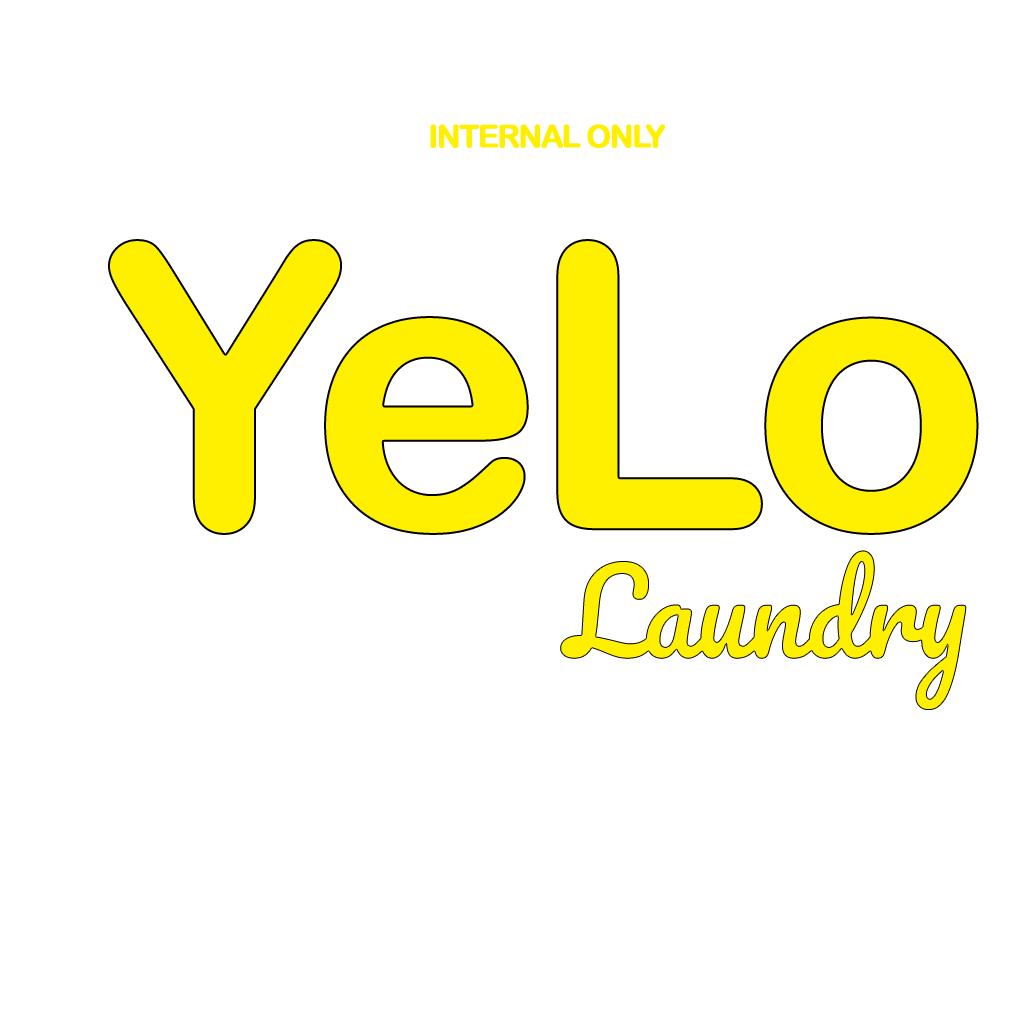
<style>
.page{position:relative;width:1024px;height:1024px;background:#ffffff}
.page>*{position:absolute;margin:0}
.t1{font:30.9px "ArialRoundedMTBold";letter-spacing:-0.06em;color:#fff000;font-weight:bold}
.t2{font:391.3px "ArialRoundedMTBold";letter-spacing:-0.06em;color:#fff000;font-weight:bold}
.t3{font:114.3px "Pacifico-Regular";color:#fff000}
</style>
<div class="page">
<p class="t1" style="left:430px;top:124px;width:235px;height:24px">INTERNAL ONLY</p>
<p class="t2" style="left:108px;top:239px;width:871px;height:296px">YeLo</p>
<p class="t3" style="left:560px;top:550px;width:407px;height:160px">Laundry</p>
</div>
